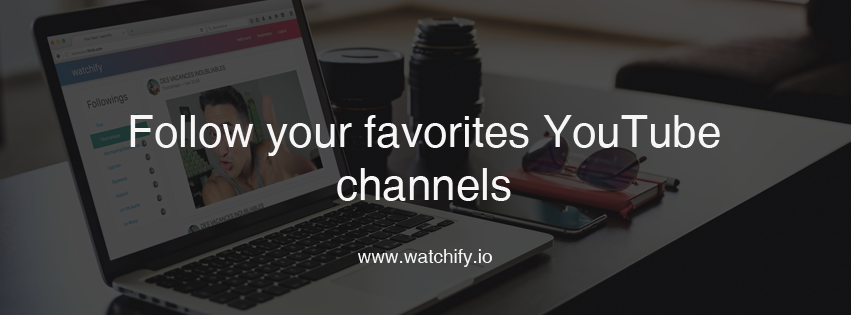
<style>
.page{position:relative;width:851px;height:315px}
.page>*{position:absolute;margin:0}
.t1{font:44px "Helvetica";color:#f6f6f6}
.t2{font:19px "Helvetica";color:#f6f6f6}
</style>
<div class="page">
<p class="t1" style="left:130px;top:115px;width:590px;height:86px;text-align:center">Follow your favorites YouTube<br>channels</p>
<p class="t2" style="left:358px;top:249px;width:134px;height:18px">www.watchify.io</p>
</div>
